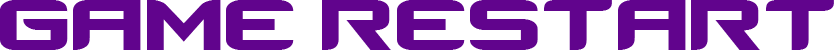
<style>
.page{position:relative;width:834px;height:50px;background:#61048d}
.page>*{position:absolute;margin:0}
.t1{font:100px "Counter-StrikeRegular";color:#61048d}
</style>
<div class="page">
<p class="t1" style="left:0px;top:0px;width:834px;height:50px">GAME RESTART</p>
</div>
